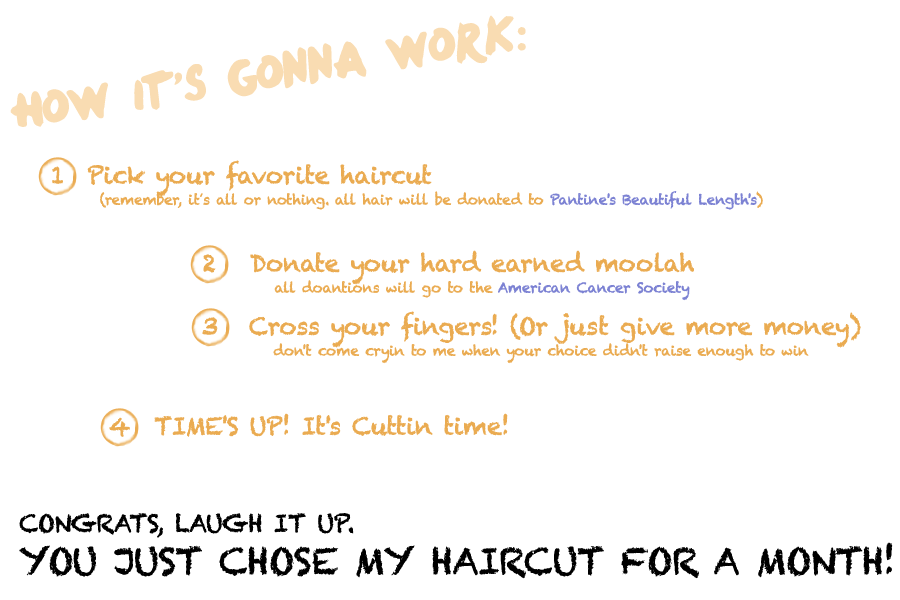
<style>
.page{position:relative;width:900px;height:600px;background:#ffffff}
.page>*{position:absolute;margin:0}
.t1{font:60px "OneDirection";letter-spacing:-0.025em;color:#f9dcb2}
.t2{font:14px/21px "Chalkduster";letter-spacing:-0.025em;color:#eaab51}
.t3{font:24px/21px "Chalkduster";letter-spacing:-0.025em;color:#eaab51}
.t4{font:14px/21px "Chalkboard";letter-spacing:-0.025em;color:#eaab51}
.t5{font:14px/21px "Chalkduster";letter-spacing:-0.025em;color:#7c82d3}
.t6{font:24px "Chalkduster";letter-spacing:-0.025em;color:#eaab51}
.t7{font:36px/21px "Chalkduster";letter-spacing:-0.025em;color:#000000}
.t8{font:24px/21px "Chalkduster";letter-spacing:-0.025em;color:#000000}
</style>
<div class="page">
<p class="t1" style="left:10px;top:15px;width:516px;height:112px;rotate:-9deg">How it's gonna work:</p>
<p class="t2" style="left:52px;top:160px;width:711px;height:50px"><span class="t3">1  Pick your favorite haircut<br></span>   (remember, it<span class="t4">’</span>s all or nothing. all hair will be donated to <span class="t5">Pantine's Beautiful Length's</span>)</p>
<p class="t3" style="left:203px;top:250px;width:491px;height:51px">2    Donate your hard earned moolah <br><span class="t2">  all doantions will go to the </span><span class="t5">American Cancer Society</span></p>
<p class="t2" style="left:202px;top:311px;width:659px;height:53px"><span class="t3">3    Cross your fingers! (Or just give more money)<br></span>  don't come cryin to me when your choice didn't raise enough to win</p>
<p class="t6" style="left:109px;top:413px;width:399px;height:24px">4    TIME'S UP! It's Cuttin time!</p>
<p class="t7" style="left:19px;top:513px;width:874px;height:66px"><span class="t8">CONGRATS, LAUGH IT UP.<br> <br></span>YOU JUST CHOSE MY HAIRCUT FOR A MONTH!</p>
</div>
